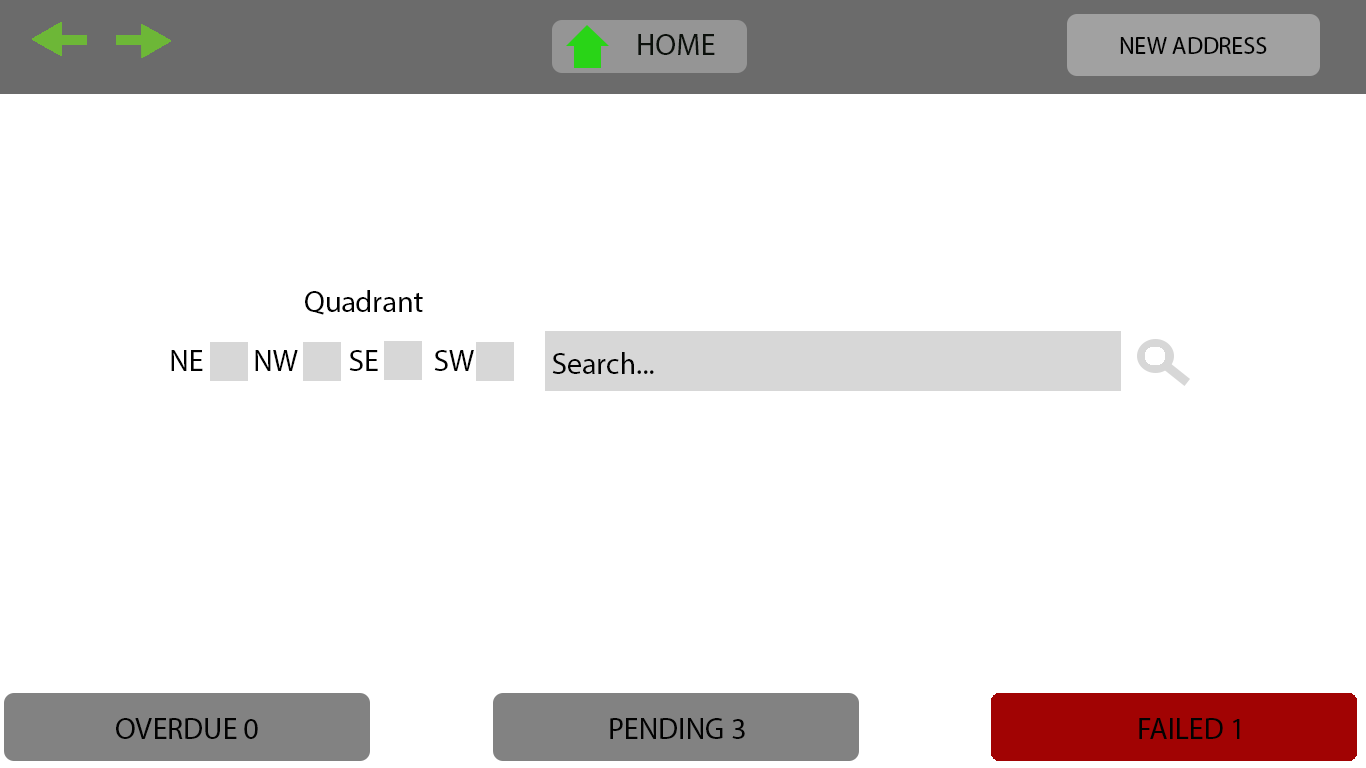
<style>
.page{position:relative;width:1366px;height:768px;background:#ffffff}
.page>*{position:absolute;margin:0}
.t1{font:30px "MyriadPro-Regular";color:#0b100b}
.t2{font:24px "MyriadPro-Regular";color:#020202}
.t3{font:30px "MyriadPro-Regular";color:#000000}
.t4{font:30px "MyriadPro-Regular";color:#010101}
.t5{font:30px "MyriadPro-Regular";color:#020202}
</style>
<div class="page">
<p class="t1" style="left:638px;top:34px;width:77px;height:21px">HOME</p>
<p class="t2" style="left:1120px;top:37px;width:147px;height:17px">NEW ADDRESS</p>
<p class="t3" style="left:305px;top:290px;width:118px;height:25px">Quadrant</p>
<p class="t3" style="left:171px;top:350px;width:32px;height:21px">NE</p>
<p class="t3" style="left:255px;top:350px;width:43px;height:21px">NW</p>
<p class="t3" style="left:349px;top:350px;width:29px;height:21px">SE</p>
<p class="t3" style="left:434px;top:350px;width:40px;height:21px">SW</p>
<p class="t4" style="left:552px;top:352px;width:102px;height:22px">Search...</p>
<p class="t5" style="left:116px;top:718px;width:142px;height:21px">OVERDUE 0</p>
<p class="t5" style="left:610px;top:718px;width:135px;height:21px">PENDING 3</p>
<p class="t5" style="left:1139px;top:718px;width:101px;height:21px">FAILED 1</p>
</div>
